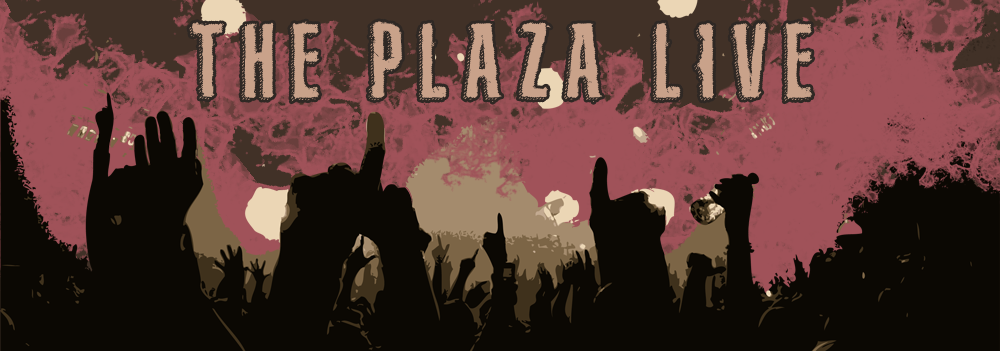
<style>
.page{position:relative;width:1000px;height:351px;background:#0b0803}
.page>*{position:absolute;margin:0}
.t1{font:100px "TheMainEvent";letter-spacing:0.16em;color:#c9a28a}
</style>
<div class="page">
<p class="t1" style="left:189px;top:21px;width:624px;height:81px">the plaza live</p>
</div>
